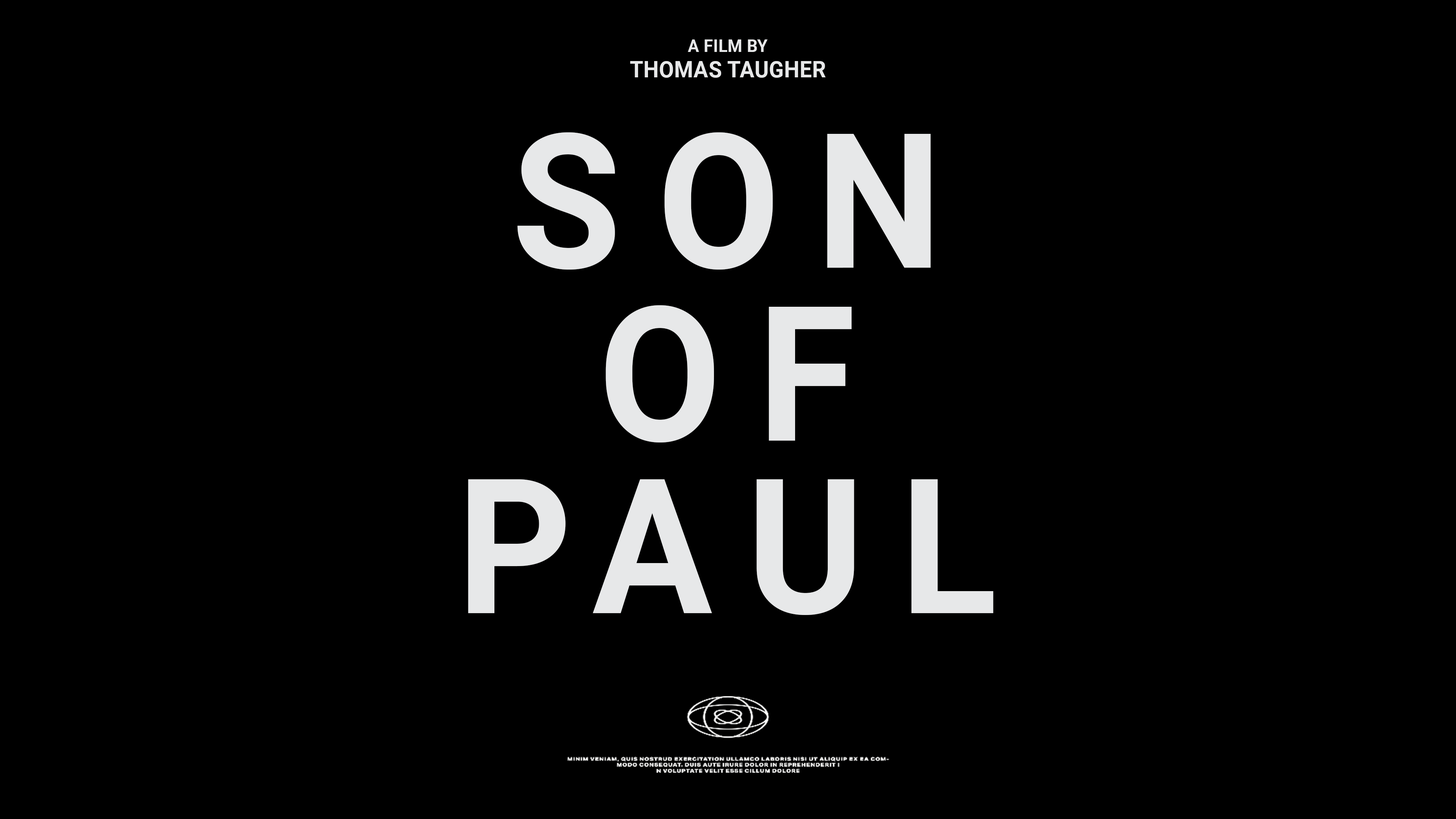
<style>
.page{position:relative;width:1456px;height:819px;background:#000000}
.page>*{position:absolute;margin:0}
.t1{font:22.6px/25.4px "Roboto-Bold";letter-spacing:0.02em;color:#e7e8e9;scale:0.95 1}
.t2{font:17.4px/21.2px "Roboto-Bold";letter-spacing:0.02em;color:#e7e8e9;scale:0.95 1}
.t3{font:188.2px/172.7px "Roboto-Bold";letter-spacing:0.2em;color:#e7e8e9;scale:0.95 1}
</style>
<div class="page">
<p class="t1" style="left:630px;top:39px;width:196px;height:39px;text-align:center"><span class="t2">A FILM BY<br></span>THOMAS TAUGHER</p>
<p class="t3" style="left:468px;top:132px;width:525px;height:483px;text-align:center">SON<br>OF<br>PAUL</p>
</div>
